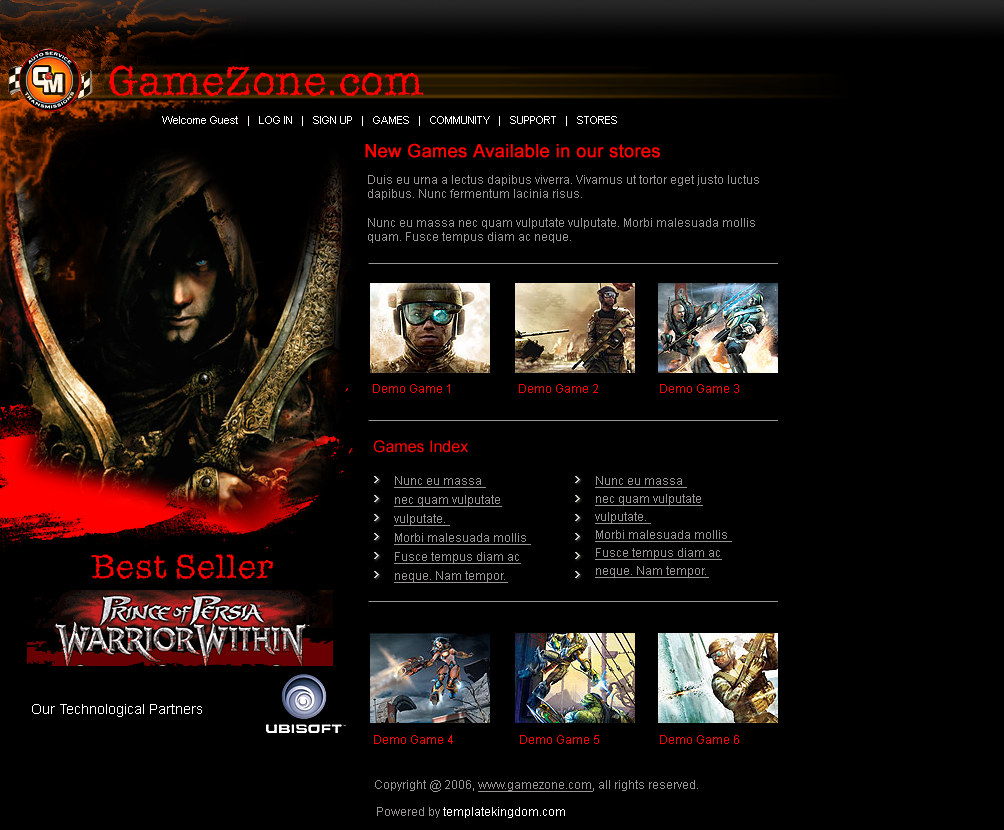
<style>
.page{position:relative;width:1004px;height:830px;background:#000000}
.page>*{position:absolute;margin:0}
.t1{font:42px "IceAgeD";color:#ff0000}
.t2{font:11px "ArialMT";color:#fefefe}
.t3{font:18px "ArialMT";color:#fe0000;font-weight:bold}
.t4{font:12px "ArialMT";color:#999696}
.t5{font:12px "ArialMT";color:#fe0000}
.t6{font:16px "ArialMT";color:#fe0000}
.t7{font:12px/19px "ArialMT";color:#999696;text-decoration:underline}
.t8{font:12px/18px "ArialMT";color:#999696;text-decoration:underline}
.t9{font:34px "IceAgeD";color:#ff0000}
.t10{font:14px "ArialMT";color:#ffffff}
.t11{font:12px "ArialMT";color:#999696;text-decoration:underline}
.t12{font:12px "ArialMT";color:#ffffff}
</style>
<div class="page">
<p class="t1" style="left:109px;top:65px;width:315px;height:32px">GameZone.com</p>
<p class="t2" style="left:162px;top:116px;width:455px;height:10px">Welcome Guest   |   LOG IN   |   SIGN UP   |   GAMES   |   COMMUNITY   |   SUPPORT   |   STORES</p>
<p class="t3" style="left:365px;top:143px;width:295px;height:15px">New Games Available in our stores</p>
<p class="t4" style="left:368px;top:175px;width:391px;height:68px">Duis eu urna a lectus dapibus viverra. Vivamus ut tortor eget justo luctus dapibus. Nunc fermentum lacinia risus. <br><br>Nunc eu massa nec quam vulputate vulputate. Morbi malesuada mollis quam. Fusce tempus diam ac neque.</p>
<p class="t5" style="left:373px;top:384px;width:77px;height:9px">Demo Game 1</p>
<p class="t5" style="left:519px;top:384px;width:79px;height:9px">Demo Game 2</p>
<p class="t5" style="left:660px;top:384px;width:79px;height:9px">Demo Game 3</p>
<p class="t6" style="left:373px;top:440px;width:95px;height:13px">Games Index</p>
<p class="t7" style="left:394px;top:476px;width:137px;height:107px">Nunc eu massa <br>nec quam vulputate vulputate. <br>Morbi malesuada mollis <br>Fusce tempus diam ac neque. Nam tempor.</p>
<p class="t8" style="left:595px;top:476px;width:137px;height:102px">Nunc eu massa <br>nec quam vulputate vulputate. <br>Morbi malesuada mollis <br>Fusce tempus diam ac neque. Nam tempor.</p>
<p class="t9" style="left:91px;top:554px;width:183px;height:26px">Best Seller</p>
<p class="t10" style="left:32px;top:704px;width:170px;height:13px">Our Technological Partners</p>
<p class="t5" style="left:374px;top:735px;width:79px;height:9px">Demo Game 4</p>
<p class="t5" style="left:520px;top:735px;width:79px;height:9px">Demo Game 5</p>
<p class="t5" style="left:660px;top:735px;width:79px;height:9px">Demo Game 6</p>
<p class="t4" style="left:375px;top:780px;width:323px;height:12px">Copyright @ 2006, <span class="t11">www.gamezone.com</span>, all rights reserved.</p>
<p class="t12" style="left:377px;top:807px;width:188px;height:11px"><span class="t4">Powered by </span>templatekingdom.com</p>
</div>
